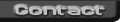
<style>
.page{position:relative;width:120px;height:22px;background:#4c4c4c}
.page>*{position:absolute;margin:0}
.t1{font:16px "Axaxaxregular";color:#bebebe;scale:1.5 1}
</style>
<div class="page">
<p class="t1" style="left:15px;top:5px;width:90px;height:10px">Contact</p>
</div>
